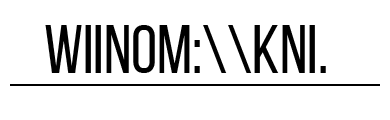
<style>
.page{position:relative;width:390px;height:120px;background:#ffffff}
.page>*{position:absolute;margin:0}
.t1{font:66.7px "BebasNeueRegular";color:#000000}
</style>
<div class="page">
<p class="t1" style="left:45px;top:25px;width:281px;height:48px">WIiNoM:\\KNI.</p>
</div>
